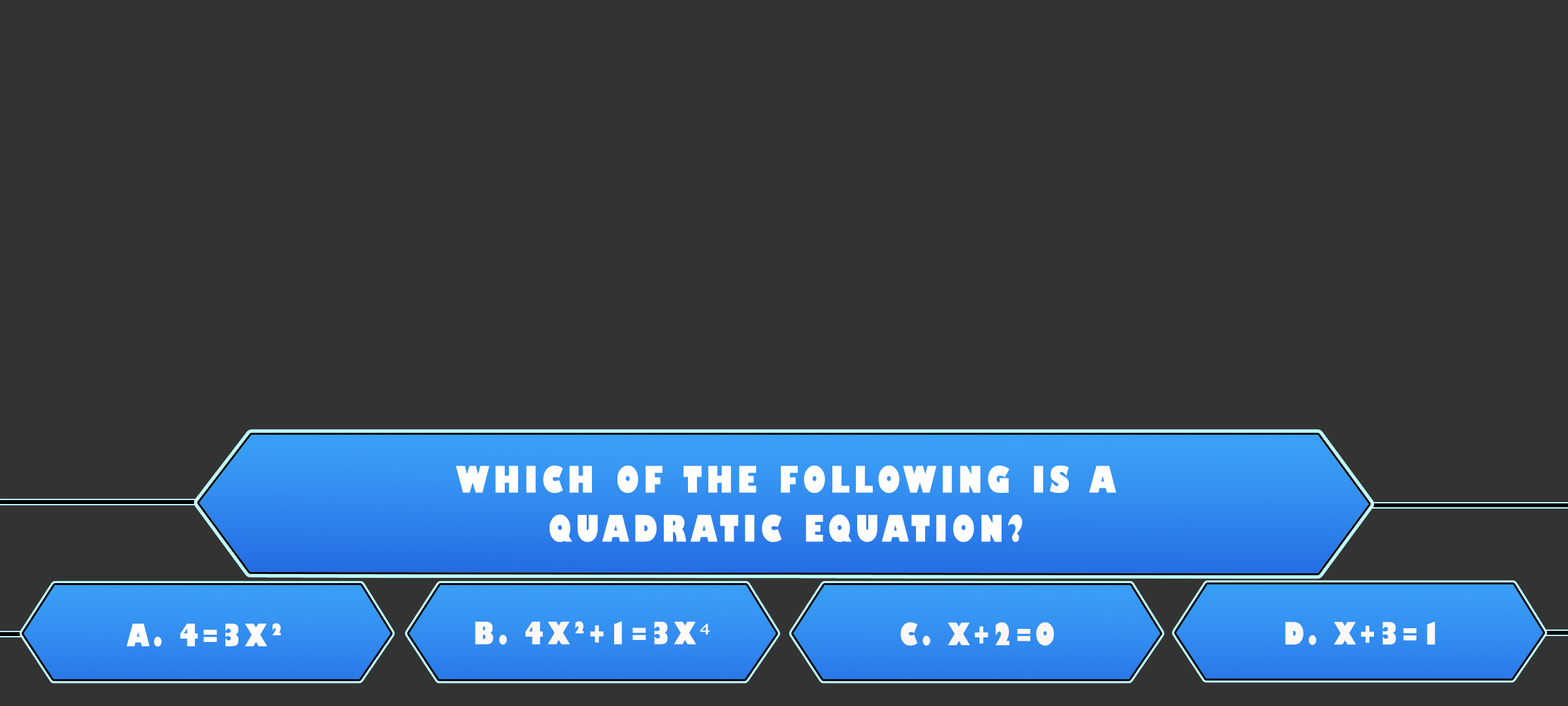
<style>
.page{position:relative;width:1568px;height:706px;background:#333333}
.page>*{position:absolute;margin:0}
.t1{font:35.4px/49px "GillSans-UltraBoldCondensed";letter-spacing:0.115em;color:#ffffff;text-transform:uppercase;scale:1.12 1}
.t2{font:29.9px "GillSans-UltraBoldCondensed";letter-spacing:0.115em;color:#fffefe;text-transform:uppercase;scale:1.12 1}
.t3{font:29.9px "GillSans-UltraBoldCondensed";letter-spacing:0.115em;color:#fdf9f9;text-transform:uppercase;scale:1.12 1}
.t4{font:29.9px "TimesNewRomanPSMT";letter-spacing:0.115em;color:#fdf9f9;text-transform:uppercase;scale:1.12 1}
.t5{font:29.9px "GillSans-UltraBoldCondensed";letter-spacing:0.115em;color:#fcf7f7;text-transform:uppercase;scale:1.12 1}
.t6{font:29.9px "GillSans-UltraBoldCondensed";letter-spacing:0.115em;color:#fbf8f8;text-transform:uppercase;scale:1.12 1}
</style>
<div class="page">
<p class="t1" style="left:456px;top:465px;width:661px;height:77px;text-align:center">Which of the following is a<br>quadratic equation?</p>
<p class="t2" style="left:127px;top:623px;width:154px;height:23px">a. 4=3x²</p>
<p class="t3" style="left:475px;top:621px;width:235px;height:23px">b. 4x²+1=3x<span class="t4">⁴</span></p>
<p class="t5" style="left:900px;top:622px;width:154px;height:23px">c. x+2=0</p>
<p class="t6" style="left:1285px;top:621px;width:150px;height:24px">d. x+3=1</p>
</div>
